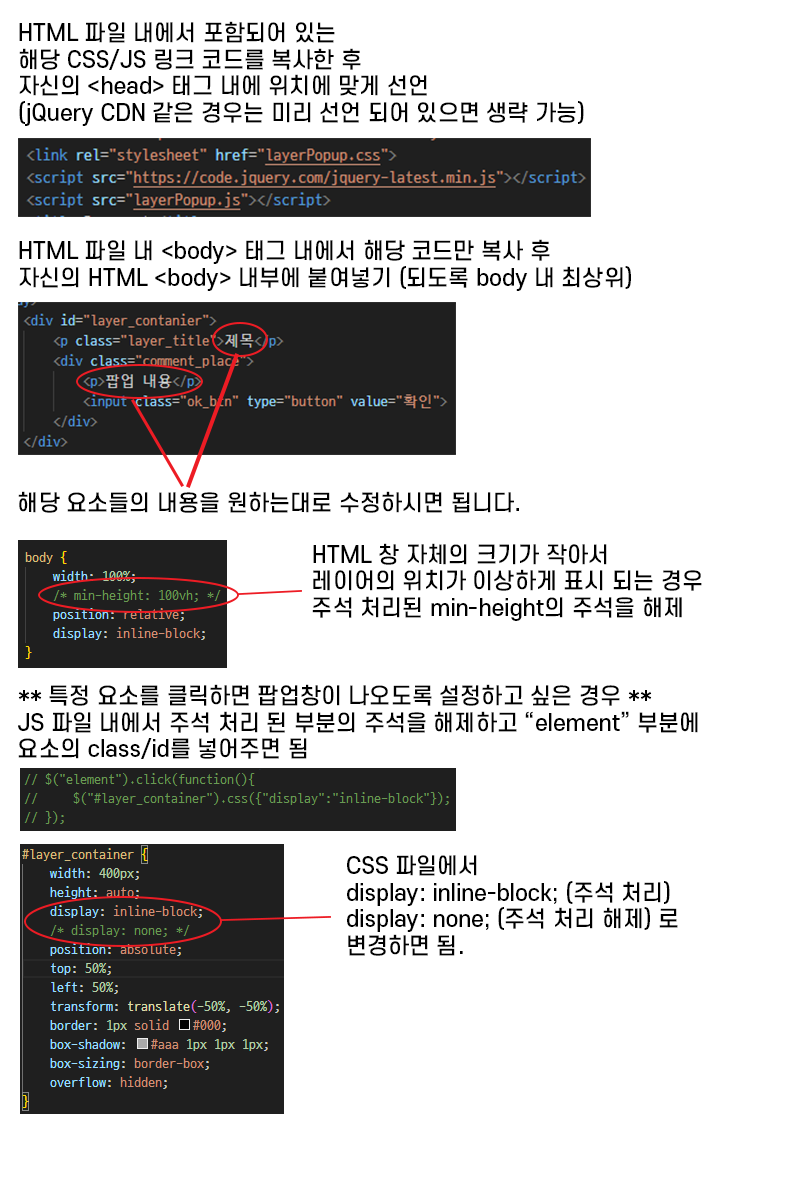
<style>
.page{position:relative;width:800px;height:1200px;background:#ffffff}
.page>*{position:absolute;margin:0}
.t1{font:22px "S-CoreDream-5Medium";color:#000000}
.t2{font:22.1px "S-CoreDream-5Medium";color:#000000}
</style>
<div class="page">
<p class="t1" style="left:19px;top:21px;width:565px;height:105px">HTML 파일 내에서 포함되어 있는<br>해당 CSS/JS 링크 코드를 복사한 후<br>자신의 &lt;head&gt; 태그 내에 위치에 맞게 선언<br>(jQuery CDN 같은 경우는 미리 선언 되어 있으면 생략 가능)</p>
<p class="t1" style="left:19px;top:239px;width:612px;height:52px">HTML 파일 내 &lt;body&gt; 태그 내에서 해당 코드만 복사 후<br>자신의 HTML &lt;body&gt; 내부에 붙여넣기 (되도록 body 내 최상위)</p>
<p class="t1" style="left:18px;top:491px;width:501px;height:22px">해당 요소들의 내용을 원하는대로 수정하시면 됩니다.</p>
<p class="t2" style="left:312px;top:543px;width:390px;height:78px">HTML 창 자체의 크기가 작아서 <br>레이어의 위치가 이상하게 표시 되는 경우<br>주석 처리된 min-height의 주석을 해제</p>
<p class="t1" style="left:18px;top:684px;width:680px;height:75px">** 특정 요소를 클릭하면 팝업창이 나오도록 설정하고 싶은 경우 **<br>JS 파일 내에서 주석 처리 된 부분의 주석을 해제하고 “element” 부분에<br>요소의 class/id를 넣어주면 됨</p>
<p class="t1" style="left:347px;top:855px;width:331px;height:101px">CSS 파일에서<br>display: inline-block; (주석 처리)<br>display: none; (주석 처리 해제) 로 변경하면 됨.</p>
</div>
